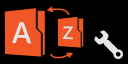
<style>
.page{position:relative;width:128px;height:64px;background:#000000}
.page>*{position:absolute;margin:0}
.t1{font:30px "SegoeUI-SemiBold";letter-spacing:-0.02em;color:#e4e4e4}
.t2{font:18.1px "SegoeUI-SemiBold";letter-spacing:-0.02em;color:#e4e4e4}
</style>
<div class="page">
<p class="t1" style="left:12px;top:22px;width:20px;height:22px;rotate:1deg">A</p>
<p class="t2" style="left:63px;top:26px;width:10px;height:14px;rotate:1deg">Z</p>
</div>
